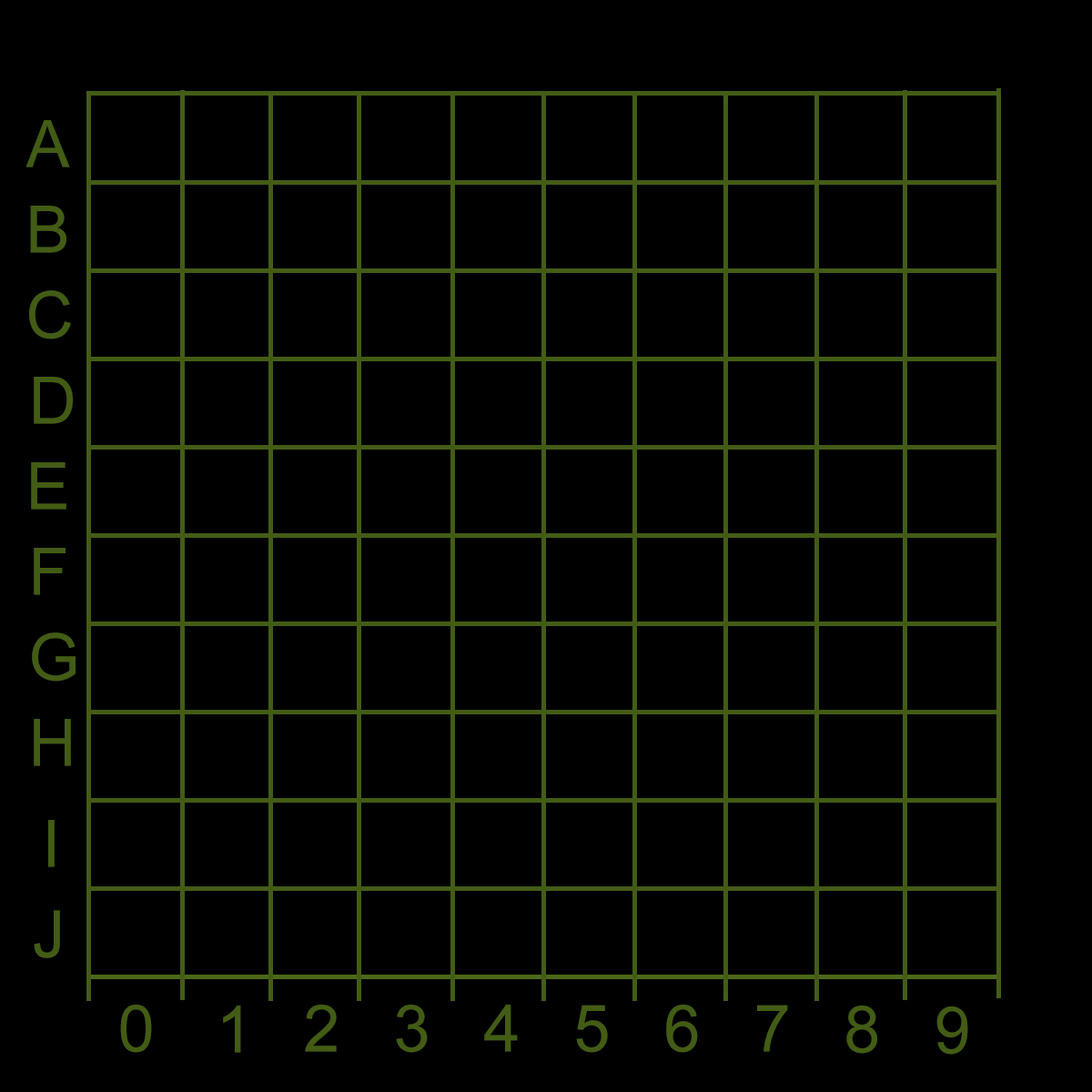
<style>
.page{position:relative;width:1092px;height:1092px;background:#000000}
.page>*{position:absolute;margin:0}
.t1{font:65.5px "ArialMT";color:#435c15}
</style>
<div class="page">
<p class="t1" style="left:25px;top:120px;width:45px;height:47px">A</p>
<p class="t1" style="left:30px;top:206px;width:36px;height:47px">B</p>
<p class="t1" style="left:29px;top:290px;width:42px;height:49px">C</p>
<p class="t1" style="left:34px;top:377px;width:39px;height:47px">D</p>
<p class="t1" style="left:31px;top:462px;width:35px;height:48px">E</p>
<p class="t1" style="left:34px;top:548px;width:32px;height:47px">F</p>
<p class="t1" style="left:32px;top:632px;width:44px;height:50px">G</p>
<p class="t1" style="left:34px;top:719px;width:37px;height:47px">H</p>
<p class="t1" style="left:48px;top:820px;width:7px;height:47px">I</p>
<p class="t1" style="left:34px;top:910px;width:26px;height:48px">J</p>
<p class="t1" style="left:120px;top:1005px;width:32px;height:48px">0</p>
<p class="t1" style="left:223px;top:1006px;width:18px;height:47px">1</p>
<p class="t1" style="left:305px;top:1005px;width:32px;height:47px">2</p>
<p class="t1" style="left:396px;top:1005px;width:32px;height:48px">3</p>
<p class="t1" style="left:484px;top:1005px;width:34px;height:47px">4</p>
<p class="t1" style="left:576px;top:1005px;width:32px;height:48px">5</p>
<p class="t1" style="left:666px;top:1005px;width:32px;height:48px">6</p>
<p class="t1" style="left:757px;top:1005px;width:31px;height:47px">7</p>
<p class="t1" style="left:846px;top:1006px;width:31px;height:48px">8</p>
<p class="t1" style="left:936px;top:1006px;width:32px;height:49px">9</p>
</div>
